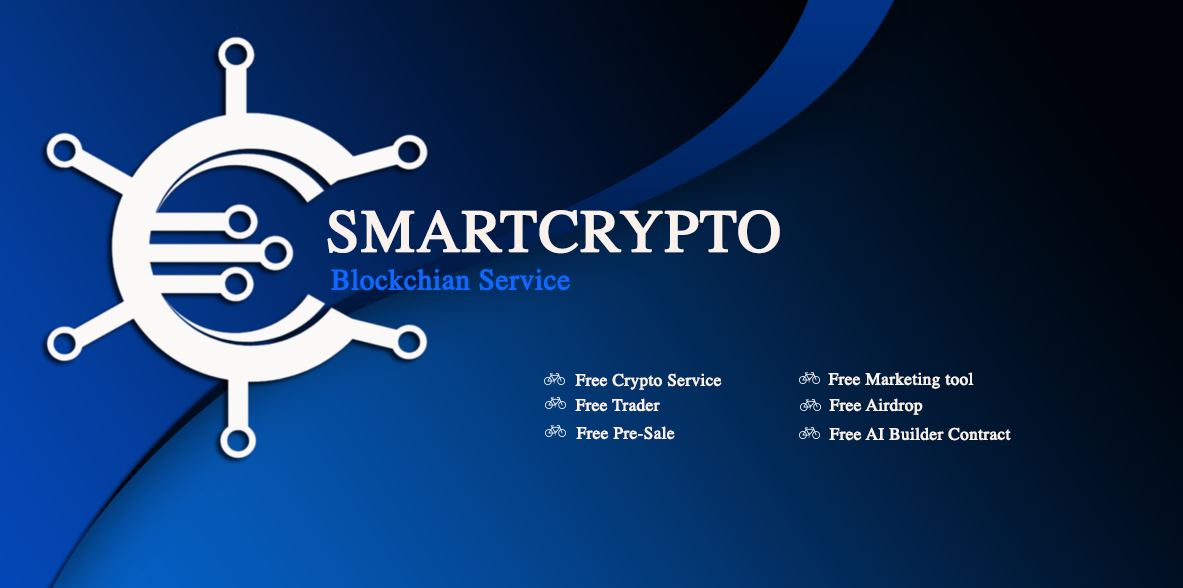
<style>
.page{position:relative;width:1183px;height:588px}
.page>*{position:absolute;margin:0}
.t1{font:60px "Times-Roman";color:#f9f2ec;font-weight:bold}
.t2{font:29.4px "Times-Roman";color:#0e68fd;font-weight:bold}
.t3{font:17.1px "Times-Roman";color:#f9f2ec;font-weight:bold}
</style>
<div class="page">
<p class="t1" style="left:327px;top:210px;width:453px;height:44px">SMARTCRYPTO</p>
<p class="t2" style="left:331px;top:268px;width:240px;height:23px">Blockchian Service</p>
<p class="t3" style="left:575px;top:373px;width:147px;height:17px">Free Crypto Service</p>
<p class="t3" style="left:828px;top:372px;width:146px;height:17px">Free Marketing tool</p>
<p class="t3" style="left:575px;top:398px;width:85px;height:14px">Free Trader</p>
<p class="t3" style="left:829px;top:398px;width:94px;height:17px">Free Airdrop</p>
<p class="t3" style="left:576px;top:426px;width:99px;height:14px">Free Pre-Sale</p>
<p class="t3" style="left:829px;top:427px;width:182px;height:14px">Free AI Builder Contract</p>
</div>
